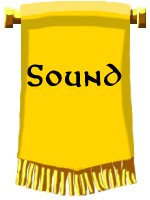
<style>
.page{position:relative;width:150px;height:200px;background:#ffd400}
.page>*{position:absolute;margin:0}
.t1{font:29.2px "DKNorthumbria";letter-spacing:0.05em;color:#000000}
</style>
<div class="page">
<p class="t1" style="left:27px;top:63px;width:95px;height:25px">Sound</p>
</div>
